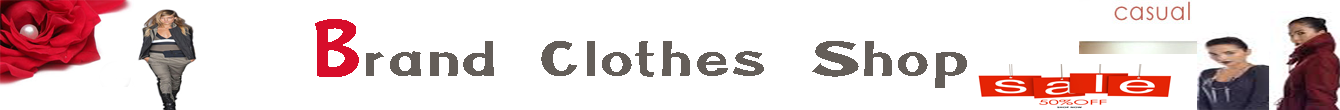
<style>
.page{position:relative;width:1340px;height:110px;background:#ffffff}
.page>*{position:absolute;margin:0}
.t1{font:122px "TS-Somtum-A-NP";color:#d70d2a}
.t2{font:72.1px "TS-Somtum-A-NP";color:#645e59;scale:1.45 1}
</style>
<div class="page">
<p class="t1" style="left:315px;top:19px;width:44px;height:58px">B</p>
<p class="t2" style="left:366px;top:41px;width:601px;height:47px">rand Clothes Shop</p>
</div>
